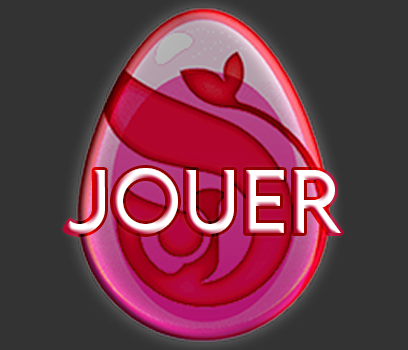
<style>
.page{position:relative;width:408px;height:350px;background:#333333}
.page>*{position:absolute;margin:0}
.t1{font:80.6px "LEMONMILK-Regular";text-transform:uppercase}
</style>
<div class="page">
<p class="t1" style="left:65px;top:168px;width:276px;height:66px">jouer</p>
</div>
